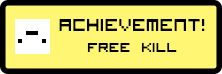
<style>
.page{position:relative;width:222px;height:74px;background:#fff774}
.page>*{position:absolute;margin:0}
.t1{font:23px "VisitorTT1BRK";color:#000000}
.t2{font:18px "VisitorTT1BRK";color:#000000}
.t3{font:40px "VisitorTT1BRK";color:#000000}
</style>
<div class="page">
<p class="t1" style="left:59px;top:19px;width:146px;height:33px;text-align:center">achievement!<br><span class="t2">Free Kill</span></p>
<p class="t3" style="left:18px;top:31px;width:28px;height:12px">.-.</p>
</div>
